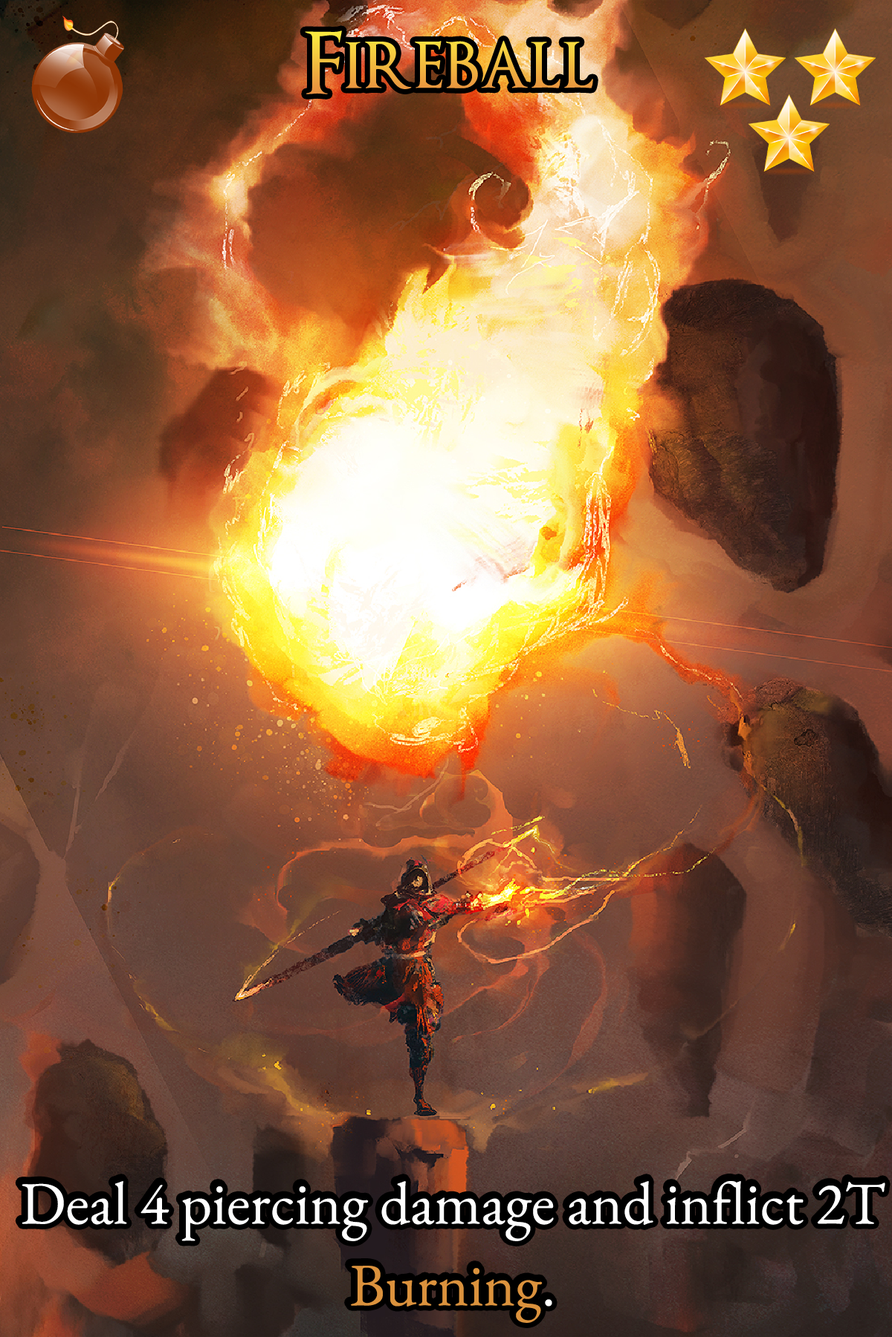
<style>
.page{position:relative;width:892px;height:1337px}
.page>*{position:absolute;margin:0}
.t1{font:144.1px "OptimusPrinceps"}
.t2{font:103.3px "EBGaramond-Regular";color:#ffffff}
.t3{font:103.3px "EBGaramond-Regular";color:#db923d}
</style>
<div class="page">
<p class="t1" style="left:305px;top:30px;width:288px;height:64px">Fireball</p>
<p class="t2" style="left:22px;top:1181px;width:863px;height:142px">Deal 4 piercing damage and inflict 2T <span class="t3">Burning</span>.</p>
</div>
